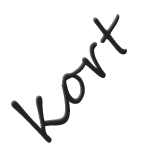
<style>
.page{position:relative;width:150px;height:150px;background:#ffffff}
.page>*{position:absolute;margin:0}
.t1{font:60px "SegoeScript";color:#212121}
.t2{font:72px "SegoeScript";color:#212121}
</style>
<div class="page">
<p class="t1" style="left:11px;top:14px;width:116px;height:129px;rotate:-51deg"><span class="t2">k</span>ort</p>
</div>
